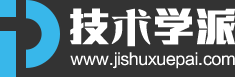
<style>
.page{position:relative;width:235px;height:77px;background:#333333}
.page>*{position:absolute;margin:0}
.t1{font:40.2px "MStiffHeiHKS-UltraBold";color:#ffffff;scale:1.05 1}
.t2{font:40.2px "DFPYaSongW9";color:#ffffff;scale:1.05 1}
.t3{font:16px "FZLTHJW--GB1-0";color:#ffffff}
</style>
<div class="page">
<p class="t1" style="left:70px;top:8px;width:165px;height:39px">技<span class="t2">术</span>学派</p>
<p class="t3" style="left:70px;top:52px;width:165px;height:17px">www.jishuxuepai.com</p>
</div>
